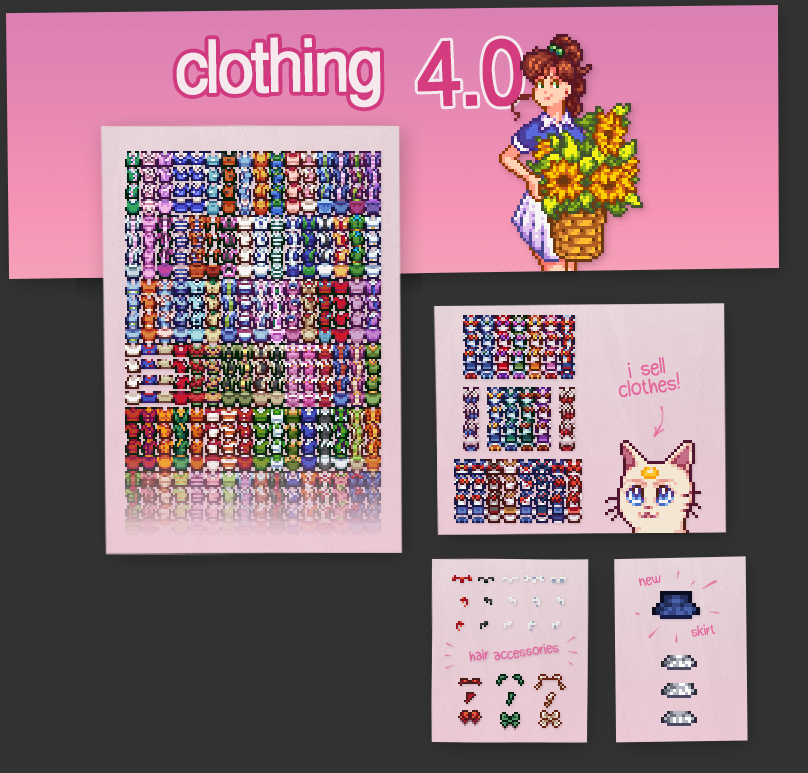
<style>
.page{position:relative;width:808px;height:773px;background:#333333}
.page>*{position:absolute;margin:0}
.t1{font:72px "Helvetica-Normal";letter-spacing:-0.06em;color:#f5e9ee;font-weight:bold;scale:0.9 1}
.t2{font:90px "Helvetica-Normal";letter-spacing:-0.05em;color:#d43c7f;font-weight:bold;scale:0.9 1}
.t3{font:24px/18px "Dudu_Calligraphy";letter-spacing:-0.06em;color:#e4649c;font-weight:bold;scale:0.9 1}
.t4{font:16px "Dudu_Calligraphy";letter-spacing:-0.06em;color:#e4649c;font-weight:bold;scale:0.9 1}
</style>
<div class="page">
<p class="t1" style="left:176px;top:37px;width:205px;height:71px;rotate:-1deg">clothing</p>
<p class="t2" style="left:417px;top:38px;width:106px;height:69px;rotate:-2deg">4.0</p>
<p class="t3" style="left:619px;top:357px;width:61px;height:40px;text-align:center;rotate:-8deg">i sell<br>clothes!</p>
<p class="t4" style="left:638px;top:575px;width:23px;height:11px;rotate:-10deg">new</p>
<p class="t4" style="left:691px;top:624px;width:25px;height:13px;rotate:-8deg">skirt</p>
<p class="t4" style="left:469px;top:649px;width:20px;height:13px;rotate:-6deg">hair</p>
<p class="t4" style="left:493px;top:643px;width:66px;height:18px;rotate:-8deg">accessories</p>
</div>
